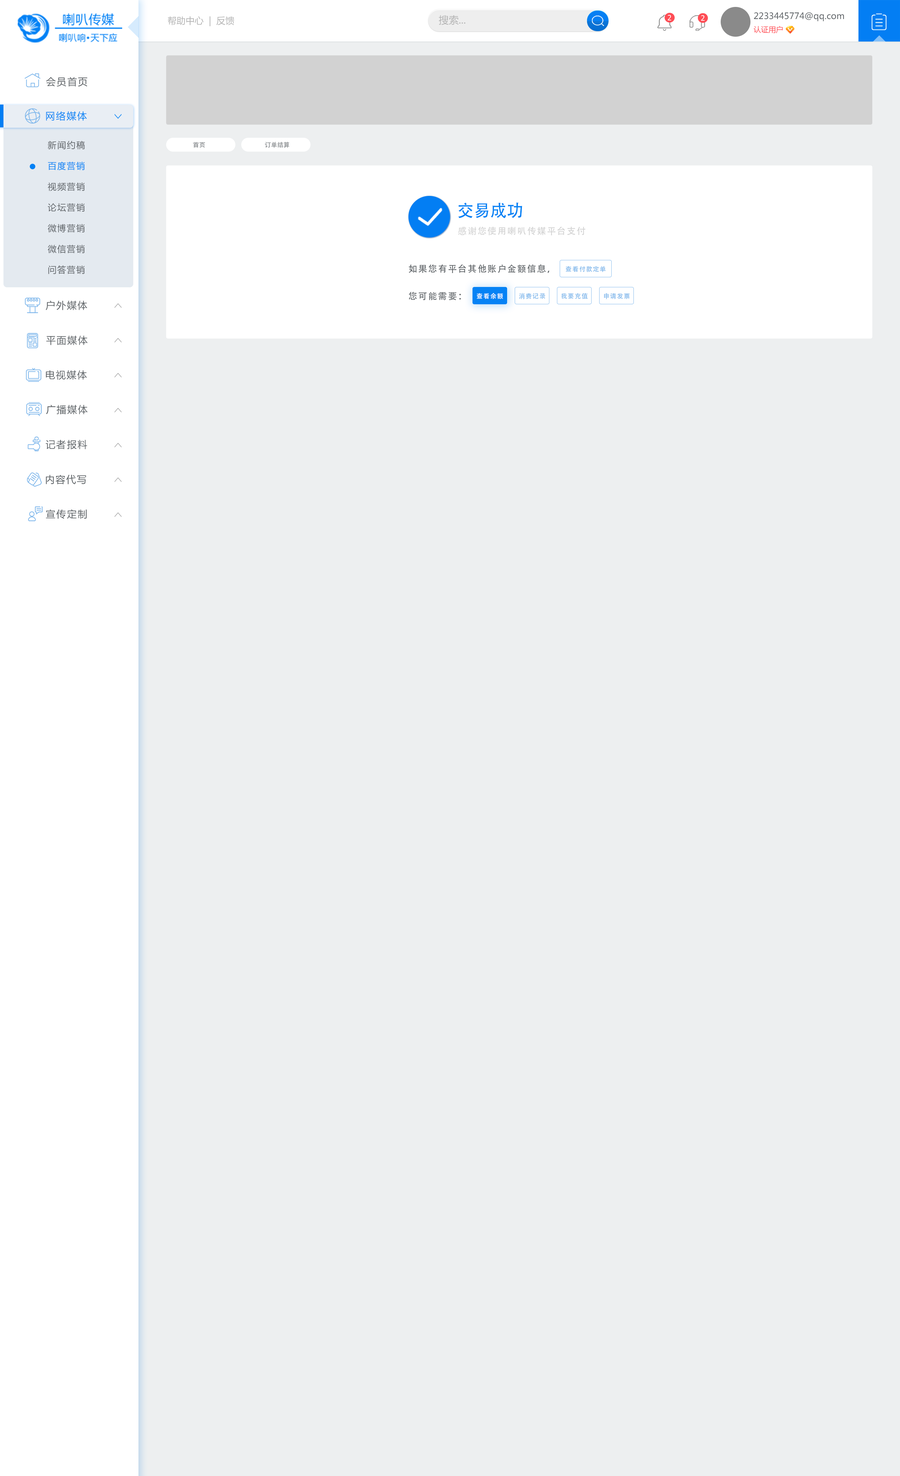
<style>
.page{position:relative;width:900px;height:1476px;background:#edeff0}
.page>*{position:absolute;margin:0}
.t1{font:9.1px "MicrosoftYaHei";color:#b4b4b4}
.t2{font:9.9px "MicrosoftYaHei";color:#b4b4b4}
.t3{font:7.3px "Tahoma";letter-spacing:0.1em;color:#ffffff;text-transform:uppercase}
.t4{font:8.7px/13px "MicrosoftYaHei";color:#5c6165}
.t5{font:7.4px/13px "MicrosoftYaHei";color:#fe4d55}
.t6{font:9.7px "MicrosoftYaHei";letter-spacing:0.1em;color:#5c6165}
.t7{font:9.7px "MicrosoftYaHei";letter-spacing:0.1em;color:#0582f5}
.t8{font:8.7px/20.8px "MicrosoftYaHei";letter-spacing:0.1em;color:#5c6165}
.t9{font:8.7px/20.8px "MicrosoftYaHei";letter-spacing:0.1em;color:#0381f5}
.t10{font:6.2px "AdobeHeitiStd-Regular";color:#878b8e}
.t11{font:16.6px "AdobeHeitiStd-Regular";color:#0582f5}
.t12{font:9px "AdobeHeitiStd-Regular";letter-spacing:0.1em;color:#d2d2d2}
.t13{font:9px "AdobeHeitiStd-Regular";letter-spacing:0.1em;color:#5c6165}
.t14{font:6.2px "AdobeHeitiStd-Regular";letter-spacing:0.1em;color:#7db6eb}
.t15{font:6.2px "AdobeHeitiStd-Regular";letter-spacing:0.1em;color:#ffffff}
</style>
<div class="page">
<p class="t1" style="left:168px;top:16px;width:66px;height:10px">帮助中心  |  反馈</p>
<p class="t2" style="left:439px;top:15px;width:27px;height:10px">搜索...</p>
<p class="t3" style="left:668px;top:15px;width:3px;height:5px">2</p>
<p class="t3" style="left:701px;top:15px;width:4px;height:6px">2</p>
<p class="t4" style="left:754px;top:12px;width:90px;height:21px">2233445774@qq.com<br><span class="t5">认证用户</span></p>
<p class="t6" style="left:46px;top:77px;width:41px;height:10px">会员首页</p>
<p class="t7" style="left:46px;top:111px;width:41px;height:10px">网络媒体</p>
<p class="t8" style="left:48px;top:141px;width:37px;height:133px">新闻约稿<br><span class="t9">百度营销<br></span>视频营销<br>论坛营销<br>微博营销<br>微信营销<br>问答营销</p>
<p class="t10" style="left:193px;top:142px;width:12px;height:6px">首页</p>
<p class="t10" style="left:265px;top:142px;width:24px;height:6px">订单结算</p>
<p class="t11" style="left:458px;top:202px;width:64px;height:16px">交易成功</p>
<p class="t12" style="left:458px;top:226px;width:127px;height:9px">感谢您使用喇叭传媒平台支付</p>
<p class="t13" style="left:409px;top:264px;width:140px;height:9px">如果您有平台其他账户金额信息，</p>
<p class="t14" style="left:566px;top:266px;width:40px;height:6px">查看付款定单</p>
<p class="t13" style="left:409px;top:292px;width:52px;height:8px">您可能需要：</p>
<p class="t15" style="left:477px;top:293px;width:26px;height:6px">查看余额</p>
<p class="t14" style="left:519px;top:293px;width:26px;height:6px">消费记录</p>
<p class="t14" style="left:561px;top:293px;width:27px;height:6px">我要充值</p>
<p class="t14" style="left:604px;top:293px;width:26px;height:6px">申请发票</p>
<p class="t6" style="left:46px;top:300px;width:41px;height:10px">户外媒体</p>
<p class="t6" style="left:46px;top:335px;width:42px;height:10px">平面媒体</p>
<p class="t6" style="left:46px;top:370px;width:41px;height:10px">电视媒体</p>
<p class="t6" style="left:46px;top:405px;width:42px;height:9px">广播媒体</p>
<p class="t6" style="left:46px;top:440px;width:41px;height:9px">记者报料</p>
<p class="t6" style="left:46px;top:475px;width:40px;height:9px">内容代写</p>
<p class="t6" style="left:46px;top:509px;width:41px;height:10px">宣传定制</p>
</div>
